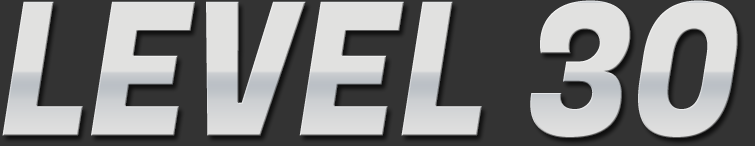
<style>
.page{position:relative;width:755px;height:146px;background:#333333}
.page>*{position:absolute;margin:0}
.t1{font:185.2px "FugazOne-Regular";color:#dfdfdf;scale:0.89 1}
</style>
<div class="page">
<p class="t1" style="left:2px;top:0px;width:736px;height:138px">LEVEL 30</p>
</div>
